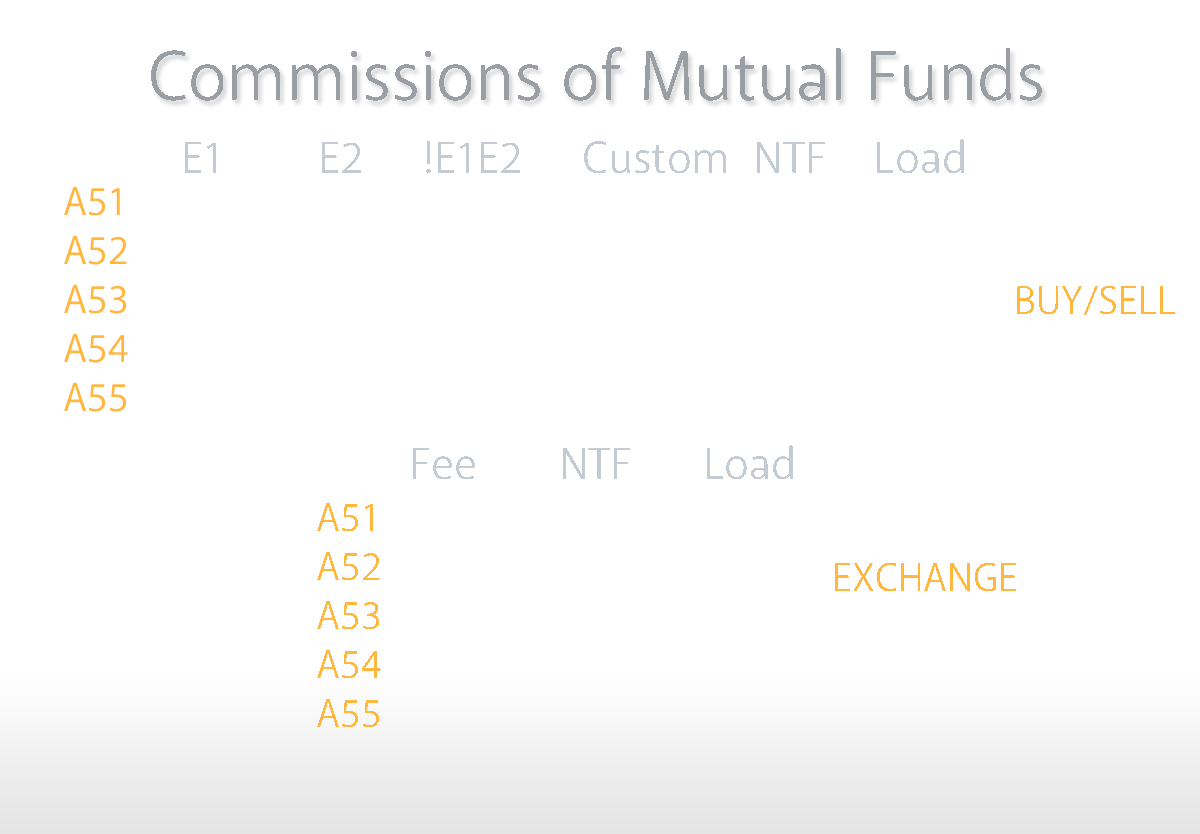
<style>
.page{position:relative;width:1200px;height:834px;background:#ffffff}
.page>*{position:absolute;margin:0}
.t1{font:70px "Anago-Book";color:#9a9fa5}
.t2{font:45px "Anago-Book";color:#c5cbd2}
.t3{font:40px/29px "Anago-Book";color:#ffb83d}
.t4{font:40px "Anago-Book";color:#ffb83d}
</style>
<div class="page">
<p class="t1" style="left:151px;top:47px;width:891px;height:54px">Commissions of Mutual Funds</p>
<p class="t2" style="left:185px;top:139px;width:779px;height:34px">E1        E2     !E1E2     Custom  NTF    Load</p>
<p class="t3" style="left:64px;top:186px;width:64px;height:226px">A51<br>A52<br>A53<br>A54<br>A55</p>
<p class="t4" style="left:1017px;top:286px;width:158px;height:29px">BUY/SELL</p>
<p class="t2" style="left:413px;top:445px;width:380px;height:34px">Fee       NTF      Load</p>
<p class="t4" style="left:835px;top:563px;width:181px;height:28px">EXCHANGE</p>
</div>
